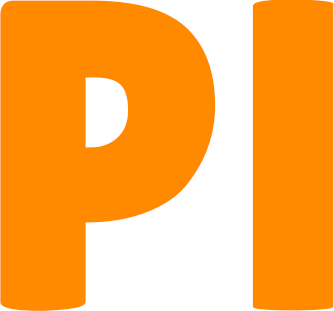
<style>
.page{position:relative;width:334px;height:311px;background:#ff8a00}
.page>*{position:absolute;margin:0}
.t1{font:442.3px "LilitaOne";color:#ff8a00}
</style>
<div class="page">
<p class="t1" style="left:0px;top:0px;width:334px;height:311px">Pl</p>
</div>
